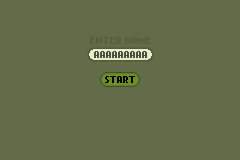
<style>
.page{position:relative;width:240px;height:160px;background:#626c46}
.page>*{position:absolute;margin:0}
.t1{font:8px "NokiaCellphoneFC-Small";color:#57603e}
.t2{font:8px "NokiaCellphoneFC-Small";color:#4a5039}
.t3{font:8px "NokiaCellphoneFC-Small";color:#000000}
</style>
<div class="page">
<p class="t1" style="left:90px;top:37px;width:61px;height:7px">ENTER NAME</p>
<p class="t2" style="left:94px;top:51px;width:53px;height:7px">AAAAAAAAA</p>
<p class="t3" style="left:105px;top:76px;width:30px;height:7px">START</p>
</div>
